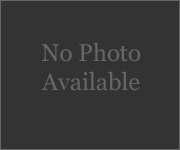
<style>
.page{position:relative;width:180px;height:150px;background:#333333}
.page>*{position:absolute;margin:0}
.t1{font:24px "Georgia";color:#666666}
</style>
<div class="page">
<p class="t1" style="left:41px;top:42px;width:100px;height:49px;text-align:center">No Photo<br>Available</p>
</div>
